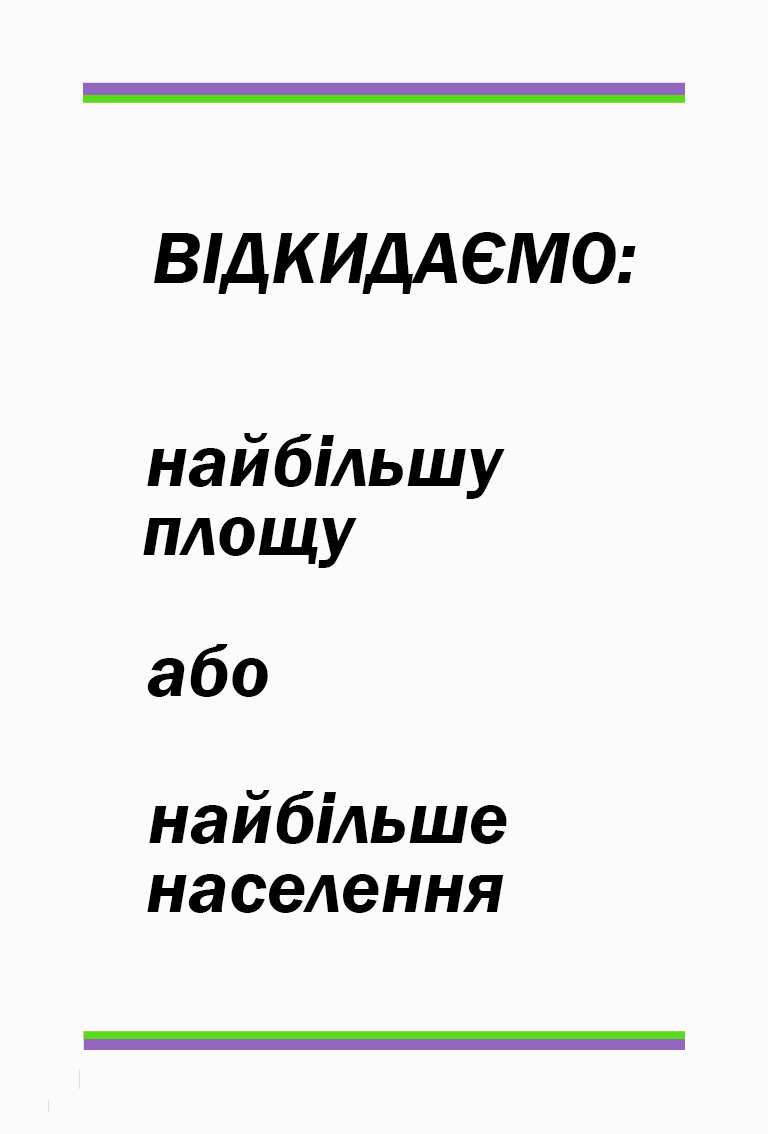
<style>
.page{position:relative;width:768px;height:1134px;background:#fbfbfb}
.page>*{position:absolute;margin:0}
.t1{font:75px "FranklinGothic-DemiItalic";color:#020000}
</style>
<div class="page">
<p class="t1" style="left:153px;top:232px;width:483px;height:62px">ВІДКИДАЄМО:</p>
<p class="t1" style="left:147px;top:433px;width:358px;height:66px">найбільшу</p>
<p class="t1" style="left:143px;top:517px;width:214px;height:51px">площу</p>
<p class="t1" style="left:147px;top:644px;width:121px;height:53px">або</p>
<p class="t1" style="left:149px;top:790px;width:358px;height:54px">найбільше</p>
<p class="t1" style="left:147px;top:874px;width:357px;height:39px">населення</p>
</div>
